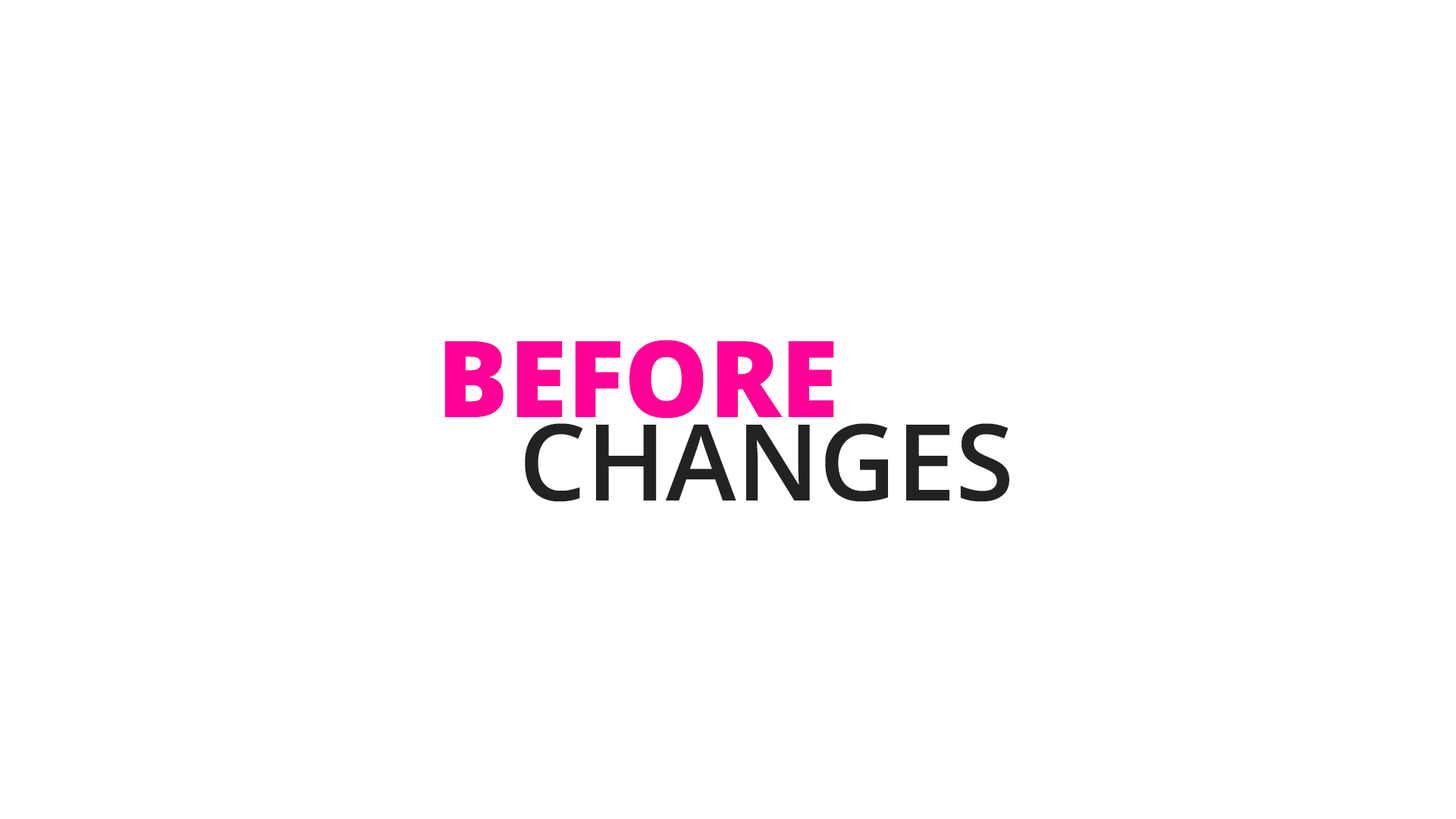
<style>
.page{position:relative;width:1456px;height:819px;background:#ffffff}
.page>*{position:absolute;margin:0}
.t1{font:106.2px/83.4px "OpenSans-Semibold";color:#222222}
.t2{font:106.2px/83.4px "OpenSans-Extrabold";color:#ff0096}
</style>
<div class="page">
<p class="t1" style="left:444px;top:340px;width:565px;height:162px"><span class="t2">BEFORE <br></span>   CHANGES</p>
</div>
